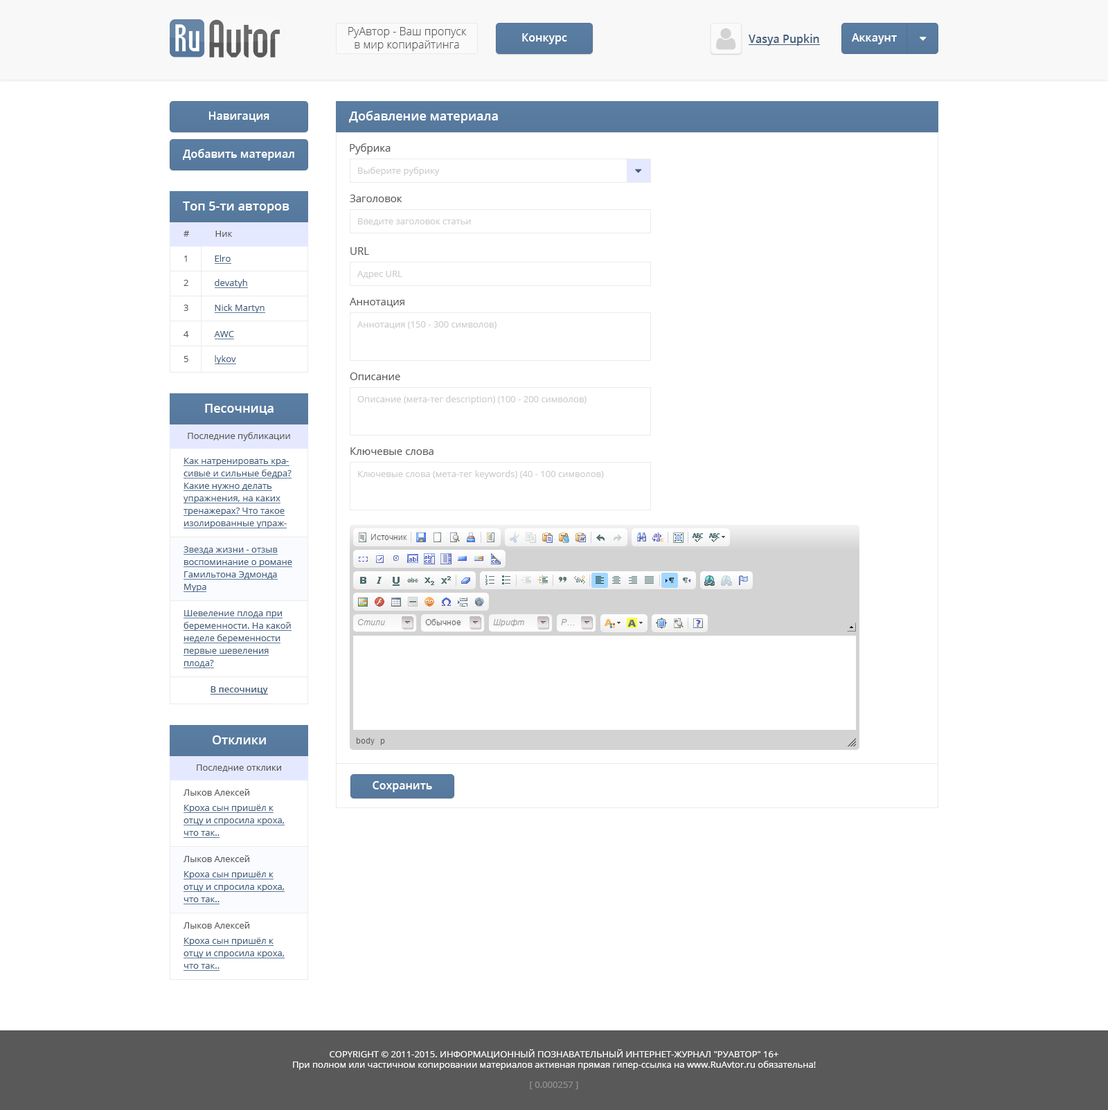
<style>
.page{position:relative;width:1108px;height:1110px;background:#ffffff}
.page>*{position:absolute;margin:0}
.t1{font:11.1px "OpenSans-Light";color:#595959}
.t2{font:11.1px "OpenSans-Semibold";color:#ffffff}
.t3{font:11.1px "OpenSans-Semibold";color:#455f7c}
.t4{font:12.5px "OpenSans-Semibold";color:#ffffff}
.t5{font:10.4px "OpenSans";color:#595959}
.t6{font:9px "OpenSans";color:#cccccc}
.t7{font:9px "OpenSans";color:#595959}
.t8{font:9px "OpenSans";color:#455f7c}
.t9{font:9px/12.5px "OpenSans";color:#455f7c}
.t10{font:9px "OpenSans-Semibold";color:#455f7c}
.t11{font:9px "OpenSans";color:#ffffff}
.t12{font:9px "OpenSans";color:#929292}
</style>
<div class="page">
<p class="t1" style="left:348px;top:27px;width:119px;height:24px;text-align:center">РуАвтор - Ваш пропуск<br>в мир копирайтинга</p>
<p class="t2" style="left:522px;top:33px;width:45px;height:11px">Конкурс</p>
<p class="t3" style="left:748px;top:34px;width:71px;height:12px">Vasya Pupkin</p>
<p class="t2" style="left:852px;top:33px;width:45px;height:11px">Аккаунт</p>
<p class="t2" style="left:208px;top:111px;width:61px;height:11px">Навигация</p>
<p class="t4" style="left:349px;top:111px;width:149px;height:12px">Добавление материала</p>
<p class="t2" style="left:183px;top:149px;width:111px;height:12px">Добавить материал</p>
<p class="t5" style="left:350px;top:143px;width:40px;height:11px">Рубрика</p>
<p class="t6" style="left:358px;top:167px;width:82px;height:9px">Выберите рубрику</p>
<p class="t5" style="left:350px;top:195px;width:52px;height:7px">Заголовок</p>
<p class="t4" style="left:183px;top:201px;width:106px;height:12px">Топ 5-ти авторов</p>
<p class="t6" style="left:358px;top:218px;width:113px;height:8px">Введите заголовок статьи</p>
<p class="t7" style="left:183px;top:231px;width:50px;height:6px">#           Ник</p>
<p class="t8" style="left:184px;top:255px;width:47px;height:7px"><span class="t7">1           </span>Elro</p>
<p class="t5" style="left:350px;top:247px;width:19px;height:8px">URL</p>
<p class="t8" style="left:183px;top:279px;width:64px;height:9px"><span class="t7">2           </span>devatyh</p>
<p class="t6" style="left:357px;top:271px;width:45px;height:8px">Адрес URL</p>
<p class="t8" style="left:183px;top:304px;width:81px;height:9px"><span class="t7">3           </span>Nick Martyn</p>
<p class="t5" style="left:350px;top:298px;width:54px;height:9px">Аннотация</p>
<p class="t6" style="left:357px;top:321px;width:139px;height:8px">Аннотация (150 - 300 символов)</p>
<p class="t8" style="left:183px;top:331px;width:51px;height:6px"><span class="t7">4           </span>AWC</p>
<p class="t8" style="left:183px;top:355px;width:53px;height:9px"><span class="t7">5           </span>lykov</p>
<p class="t5" style="left:350px;top:372px;width:50px;height:8px">Описание</p>
<p class="t6" style="left:357px;top:395px;width:229px;height:9px">Описание (мета-тег description) (100 - 200 символов)</p>
<p class="t4" style="left:205px;top:404px;width:68px;height:11px">Песочница</p>
<p class="t7" style="left:188px;top:432px;width:102px;height:9px">Последние публикации</p>
<p class="t5" style="left:350px;top:447px;width:83px;height:8px">Ключевые слова</p>
<p class="t9" style="left:183px;top:458px;width:108px;height:70px">Как натренировать красивые и сильные бедра? Какие нужно делать упражнения, на каких тренажерах? Что такое изолированные упражнения и для чего они нужны?</p>
<p class="t6" style="left:358px;top:470px;width:246px;height:9px">Ключевые слова (мета-тег keywords) (40 - 100 символов)</p>
<p class="t9" style="left:183px;top:546px;width:109px;height:46px">Звезда жизни - отзыв воспоминание о романе Гамильтона Эдмонда Мура</p>
<p class="t9" style="left:183px;top:610px;width:108px;height:57px">Шевеление плода при беременности. На какой неделе беременности первые шевеления плода?</p>
<p class="t10" style="left:210px;top:686px;width:58px;height:8px">В песочницу</p>
<p class="t4" style="left:213px;top:735px;width:53px;height:9px">Отклики</p>
<p class="t7" style="left:197px;top:764px;width:84px;height:8px">Последние отклики</p>
<p class="t2" style="left:372px;top:781px;width:60px;height:11px">Сохранить</p>
<p class="t7" style="left:183px;top:789px;width:66px;height:6px">Лыков Алексей</p>
<p class="t9" style="left:183px;top:804px;width:102px;height:32px">Кроха сын пришёл к отцу и спросила кроха, что так..</p>
<p class="t7" style="left:183px;top:855px;width:66px;height:7px">Лыков Алексей</p>
<p class="t9" style="left:183px;top:871px;width:102px;height:31px">Кроха сын пришёл к отцу и спросила кроха, что так..</p>
<p class="t7" style="left:183px;top:921px;width:66px;height:7px">Лыков Алексей</p>
<p class="t9" style="left:183px;top:937px;width:102px;height:32px">Кроха сын пришёл к отцу и спросила кроха, что так..</p>
<p class="t11" style="left:293px;top:1049px;width:523px;height:21px;text-align:center">COPYRIGHT © 2011-2015. ИНФОРМАЦИОННЫЙ ПОЗНАВАТЕЛЬНЫЙ ИНТЕРНЕТ-ЖУРНАЛ "РУАВТОР" 16+<br>При полном или частичном копировании материалов активная прямая гипер-ссылка на www.RuAvtor.ru обязательна!</p>
<p class="t12" style="left:530px;top:1081px;width:48px;height:8px">[ 0.000257 ]</p>
</div>
